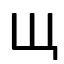
<style>
.page{position:relative;width:64px;height:64px;background:#ffffff}
.page>*{position:absolute;margin:0}
.t1{font:58.3px "Calibri";color:#000000}
</style>
<div class="page">
<p class="t1" style="left:11px;top:13px;width:47px;height:47px">Щ</p>
</div>
